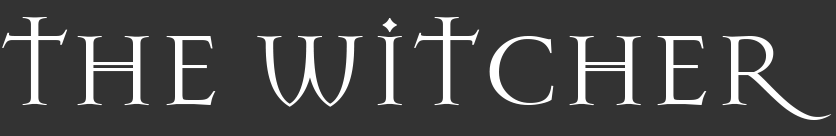
<style>
.page{position:relative;width:836px;height:136px;background:#333333}
.page>*{position:absolute;margin:0}
.t1{font:108.3px "MasonChronicles";color:#ffffff}
</style>
<div class="page">
<p class="t1" style="left:2px;top:17px;width:830px;height:103px">THE WITCHER</p>
</div>
